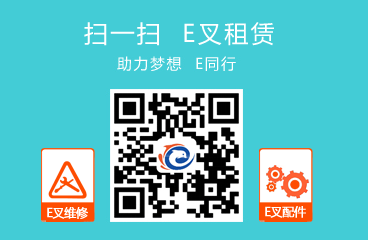
<style>
.page{position:relative;width:368px;height:240px;background:#43ccd6}
.page>*{position:absolute;margin:0}
.t1{font:24px "MicrosoftYaHei";letter-spacing:0.1em;color:#ffffff}
.t2{font:12px "MicrosoftYaHei";letter-spacing:-0.05em;color:#ffffff;font-weight:bold}
</style>
<div class="page">
<p class="t1" style="left:84px;top:22px;width:190px;height:24px">扫一扫  E叉租赁</p>
<p class="t2" style="left:47px;top:207px;width:41px;height:12px">E叉维修</p>
<p class="t2" style="left:265px;top:206px;width:41px;height:12px">E叉配件</p>
</div>
